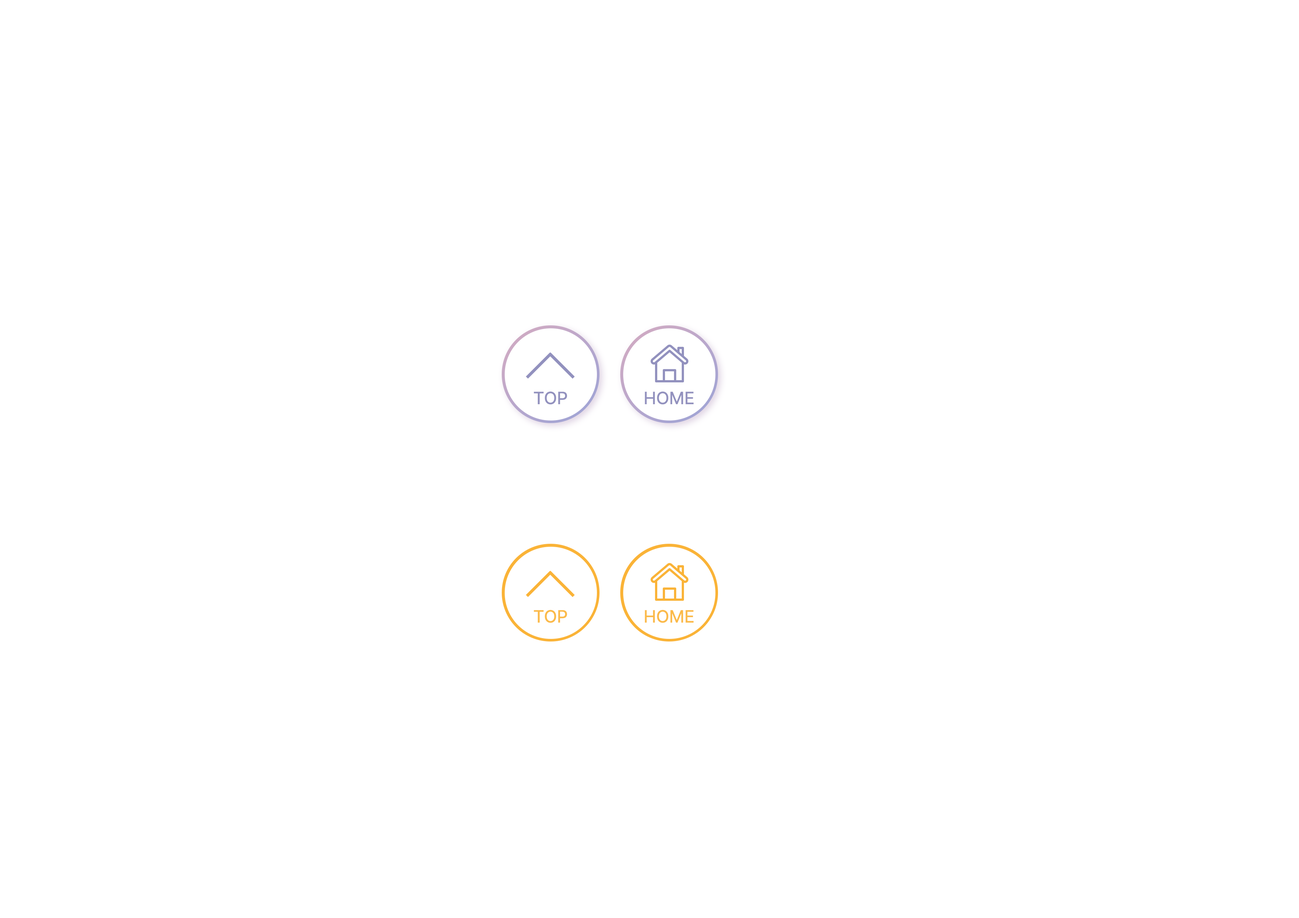
<style>
.page{position:relative;width:1299px;height:918px;background:#ffffff}
.page>*{position:absolute;margin:0}
.t1{font:17.7px "Pretendard-Medium";color:#9291be}
.t2{font:17.7px "Pretendard-Medium";color:#fbba49}
</style>
<div class="page">
<p class="t1" style="left:533px;top:391px;width:34px;height:14px">TOP</p>
<p class="t1" style="left:645px;top:391px;width:48px;height:14px">HOME</p>
<p class="t2" style="left:533px;top:610px;width:34px;height:13px">TOP</p>
<p class="t2" style="left:645px;top:610px;width:48px;height:13px">HOME</p>
</div>
